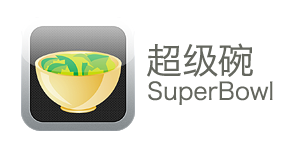
<style>
.page{position:relative;width:296px;height:143px;background:#ffffff}
.page>*{position:absolute;margin:0}
.t1{font:36px "HiraginoSansGB-W3";color:#64665e}
.t2{font:24px "HiraginoSansGB-W3";color:#64665e}
</style>
<div class="page">
<p class="t1" style="left:147px;top:43px;width:106px;height:34px">超级碗</p>
<p class="t2" style="left:148px;top:81px;width:125px;height:24px">SuperBowl</p>
</div>
